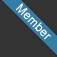
<style>
.page{position:relative;width:57px;height:57px;background:#333333}
.page>*{position:absolute;margin:0}
.t1{font:12px "Helvetica";color:#ffffff}
</style>
<div class="page">
<p class="t1" style="left:15px;top:3px;width:36px;height:37px;rotate:45deg">Member</p>
</div>
